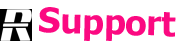
<style>
.page{position:relative;width:192px;height:51px;background:#ffffff}
.page>*{position:absolute;margin:0}
.t1{font:33.9px "Tahoma-Bold";color:#fb0981}
</style>
<div class="page">
<p class="t1" style="left:39px;top:7px;width:137px;height:34px;rotate:2deg">Support</p>
</div>
